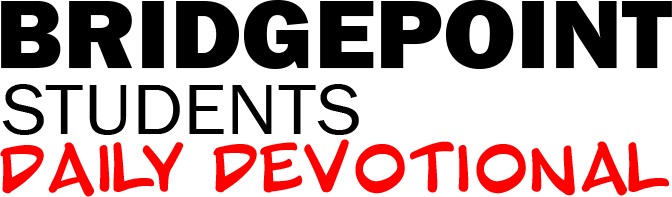
<style>
.page{position:relative;width:672px;height:197px;background:#ffffff}
.page>*{position:absolute;margin:0}
.t1{font:100px "FranklinGothic-Heavy";color:#000000;scale:1.06 1}
.t2{font:74.3px "FranklinGothic-Book";color:#000000;scale:1.07 1}
.t3{font:57.2px "BlambotProBB";color:#fe0000}
</style>
<div class="page">
<p class="t1" style="left:1px;top:0px;width:671px;height:69px">BRIDGEPOINT</p>
<p class="t2" style="left:2px;top:84px;width:357px;height:51px">STUDENTS</p>
<p class="t3" style="left:0px;top:139px;width:669px;height:58px">Daily Devotional</p>
</div>
